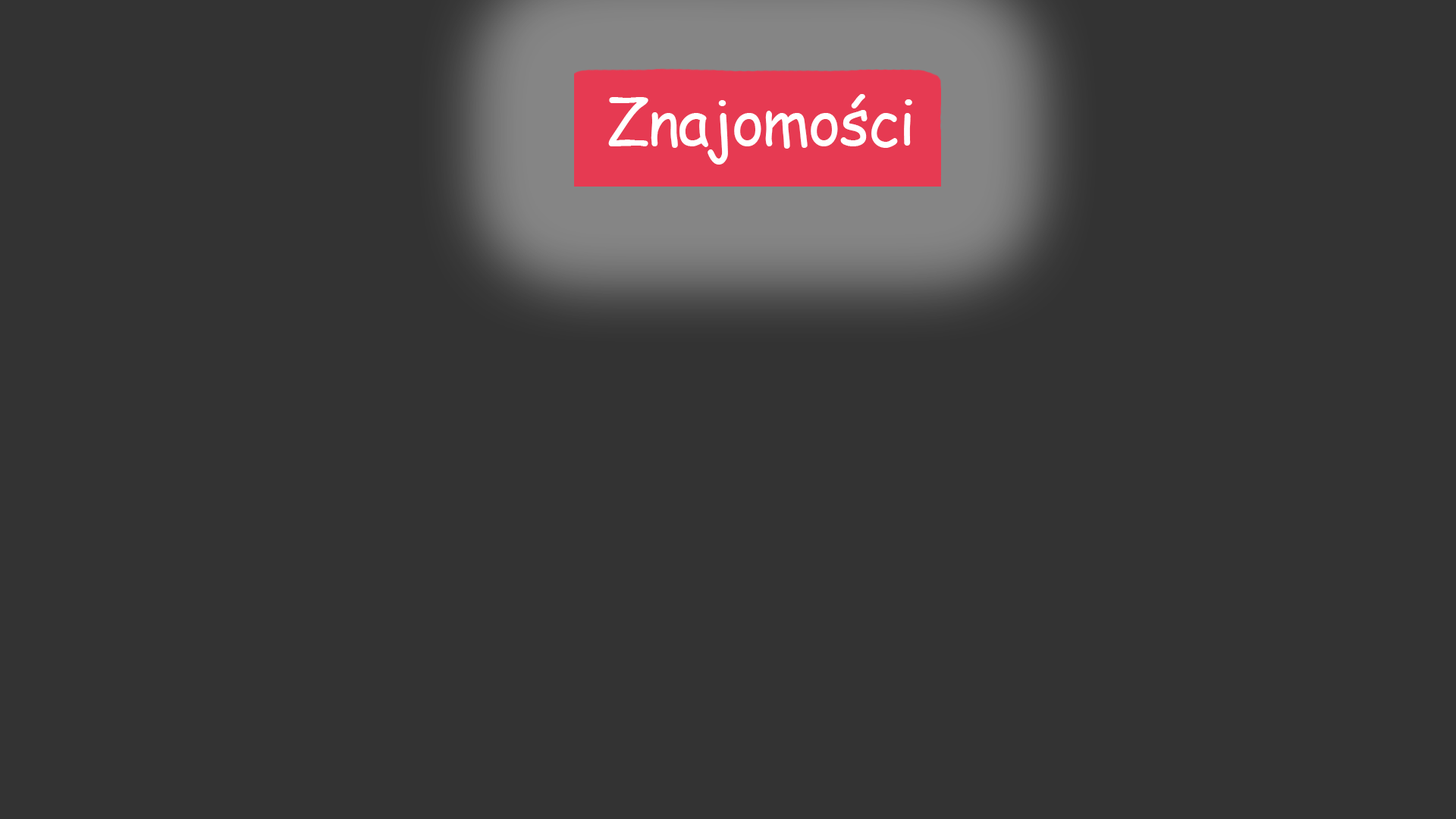
<style>
.page{position:relative;width:1456px;height:819px;background:#333333}
.page>*{position:absolute;margin:0}
.t1{font:64.5px "ComicSansMS";letter-spacing:-0.02em;color:#ffffff;scale:0.95 1}
</style>
<div class="page">
<p class="t1" style="left:608px;top:94px;width:304px;height:71px">Znajomości</p>
</div>
